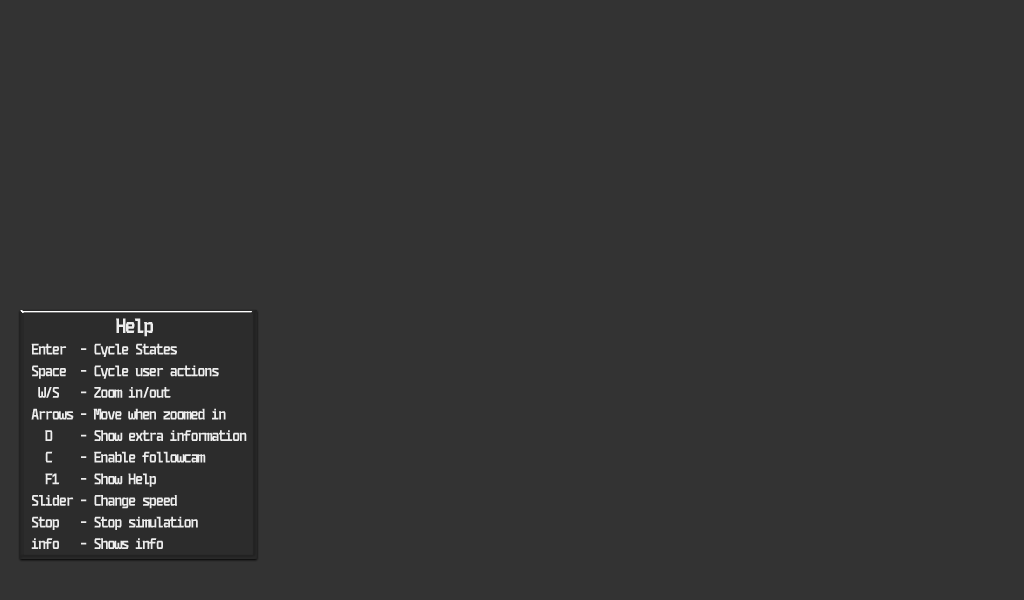
<style>
.page{position:relative;width:1024px;height:600px;background:#333333}
.page>*{position:absolute;margin:0}
.t1{font:18px "CodenameCoderFree4F-Bold";letter-spacing:-0.075em;color:#ffffff}
.t2{font:24px "CodenameCoderFree4F-Bold";letter-spacing:-0.075em;color:#ffffff}
</style>
<div class="page">
<p class="t1" style="left:31px;top:318px;width:216px;height:231px;text-align:center"><span class="t2">                           Help<br></span>Enter  - Cycle States <br>Space  - Cycle user actions<br> W/S   - Zoom in/out<br>Arrows - Move when zoomed in<br>  D    - Show extra information<br>  C    - Enable followcam<br>  F1   - Show Help<br>Slider - Change speed<br>Stop   - Stop simulation<br>info   - Shows info</p>
</div>
